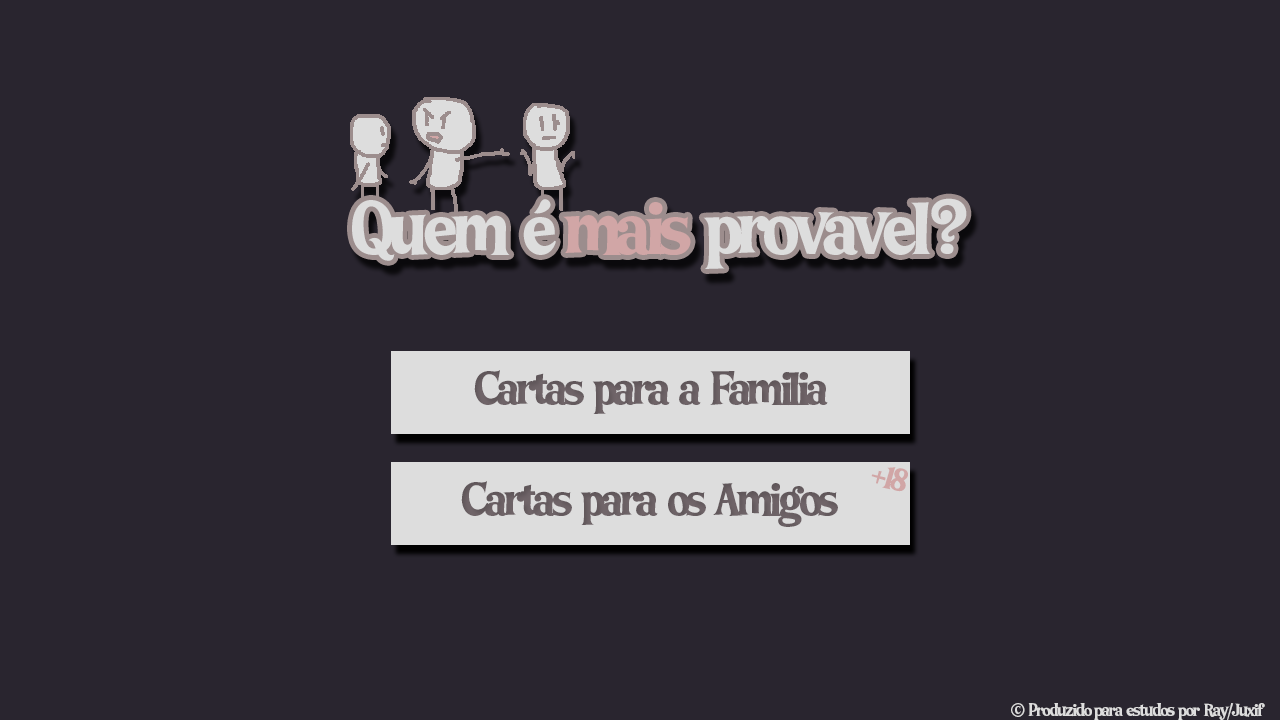
<style>
.page{position:relative;width:1280px;height:720px;background:#29252f}
.page>*{position:absolute;margin:0}
.t1{font:48px "LTFunk-Bold";letter-spacing:-0.08em;color:#706569}
.t2{font:32.1px "LTFunk-Bold";letter-spacing:-0.08em;color:#d1a6a6}
.t3{font:18px "LTFunk-Bold";letter-spacing:-0.08em;color:#dddddd}
</style>
<div class="page">
<p class="t1" style="left:474px;top:370px;width:354px;height:44px">Cartas   para   a   Familia</p>
<p class="t2" style="left:871px;top:467px;width:37px;height:25px;rotate:15deg">+18</p>
<p class="t1" style="left:461px;top:481px;width:377px;height:46px">Cartas   para   os   Amigos</p>
<p class="t3" style="left:1011px;top:703px;width:254px;height:17px">©   Produzido  para   estudos   por   Ray/Juxif</p>
</div>
